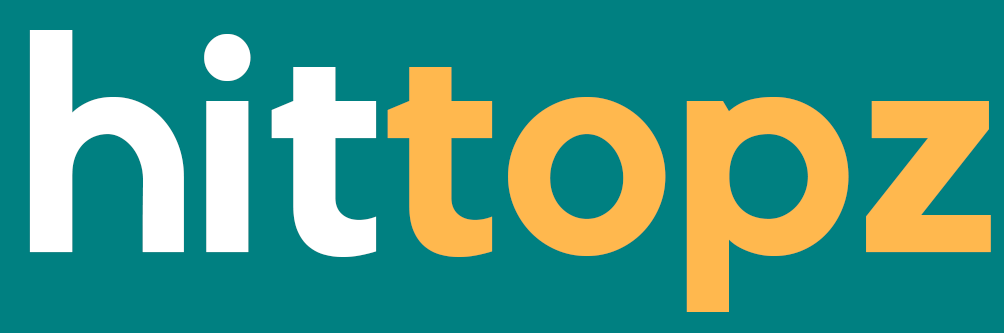
<style>
.page{position:relative;width:1004px;height:333px;background:#008081}
.page>*{position:absolute;margin:0}
.t1{font:304px "Kollektif-Bold";color:#ffb84e}
.t2{font:304px "Kollektif-Bold";color:#ffffff}
</style>
<div class="page">
<p class="t1" style="left:29px;top:30px;width:962px;height:282px"><span class="t2">hit</span>topz</p>
</div>
